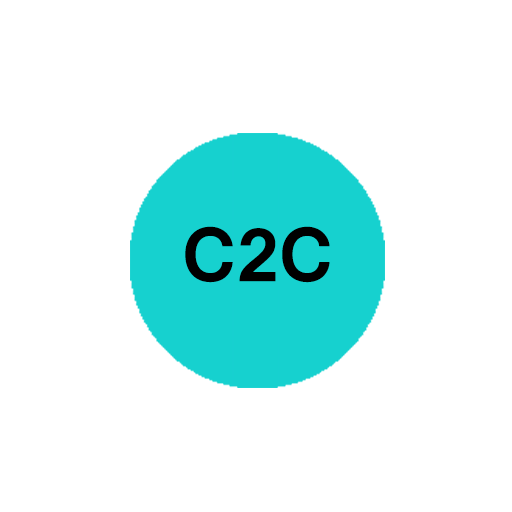
<style>
.page{position:relative;width:512px;height:512px;background:#ffffff}
.page>*{position:absolute;margin:0}
.t1{font:72px "Mangal-Bold";color:#000000}
</style>
<div class="page">
<p class="t1" style="left:185px;top:226px;width:145px;height:57px">C2C</p>
</div>
